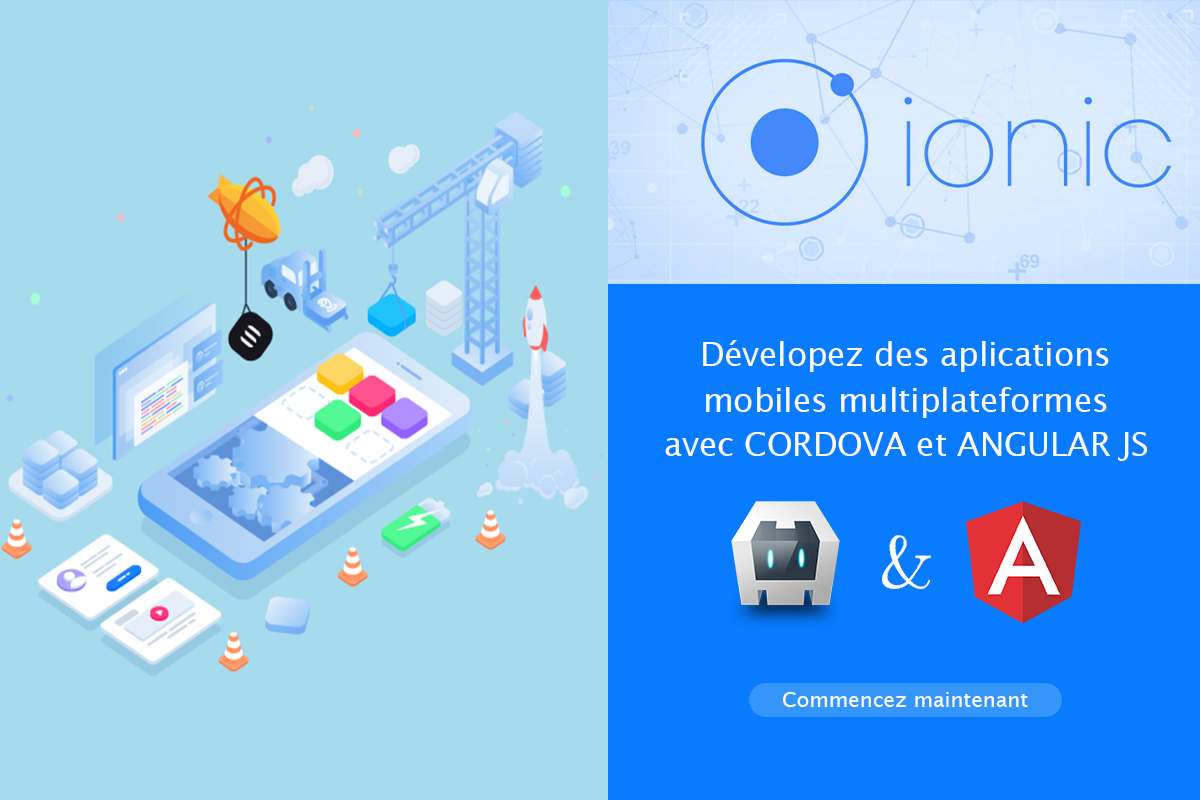
<style>
.page{position:relative;width:1200px;height:800px;background:#a6daed}
.page>*{position:absolute;margin:0}
.t1{font:32.6px "LucidaSans";color:#fbfcfd}
.t2{font:32.6px "LucidaSans";color:#fbfcfc}
.t3{font:32.6px "LucidaSans";color:#fcfdfd}
.t4{font:20.8px "LucidaSans";color:#fcfdfe}
</style>
<div class="page">
<p class="t1" style="left:703px;top:340px;width:406px;height:32px">Dévelopez des aplications</p>
<p class="t2" style="left:706px;top:387px;width:401px;height:31px">mobiles multiplateformes</p>
<p class="t3" style="left:665px;top:432px;width:482px;height:29px">avec CORDOVA et ANGULAR JS</p>
<p class="t4" style="left:783px;top:692px;width:245px;height:15px">Commencez maintenant</p>
</div>
